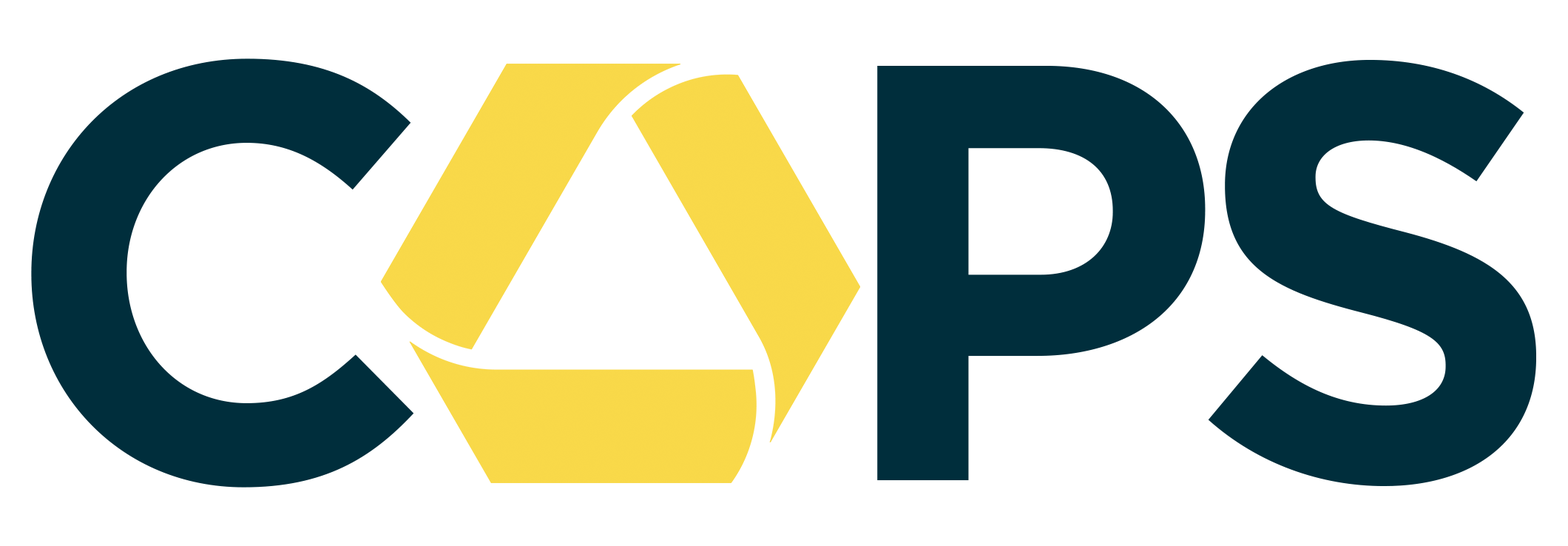
<style>
.page{position:relative;width:1568px;height:546px;background:#ffffff}
.page>*{position:absolute;margin:0}
.t1{font:591.7px "Gotham-Bold";letter-spacing:-0.06em;color:#002e3c;text-transform:uppercase}
</style>
<div class="page">
<p class="t1" style="left:31px;top:58px;width:1505px;height:429px">C   PS</p>
</div>
